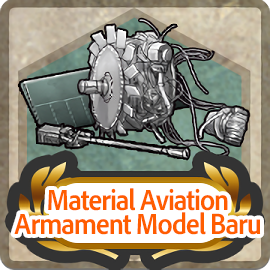
<style>
.page{position:relative;width:270px;height:270px}
.page>*{position:absolute;margin:0}
.t1{font:30px/24px "AdobeClean-Bold";letter-spacing:-0.04em;color:#ff5d00;scale:0.9 1}
</style>
<div class="page">
<p class="t1" style="left:14px;top:188px;width:247px;height:47px;text-align:center">Material Aviation<br>Armament Model Baru</p>
</div>
